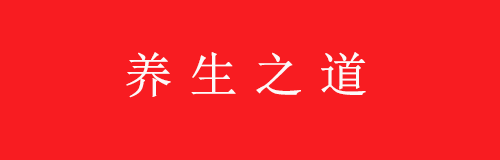
<style>
.page{position:relative;width:500px;height:160px;background:#f81c21}
.page>*{position:absolute;margin:0}
.t1{font:48px "SimSun";letter-spacing:-0.1em;color:#fcf9f9;font-weight:bold}
</style>
<div class="page">
<p class="t1" style="left:126px;top:52px;width:240px;height:46px">养 生 之 道</p>
</div>
